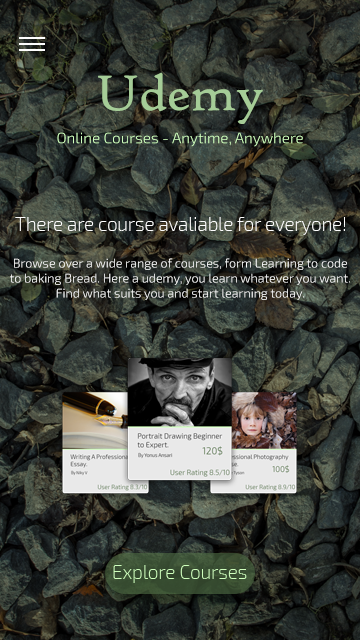
<style>
.page{position:relative;width:360px;height:640px}
.page>*{position:absolute;margin:0}
.t1{font:53.4px "HighTowerText-Reg";color:#a5cc97}
.t2{font:15.1px "Exo2-Light";color:#cfffbd}
.t3{font:18.6px "Exo2-ExtraLight";color:#ffffff}
.t4{font:12.5px "Exo2-Light";color:#ffffff}
.t5{font:18.6px "Exo2-ExtraLight";color:#cfffbd}
</style>
<div class="page">
<p class="t1" style="left:98px;top:72px;width:165px;height:52px">Udemy</p>
<p class="t2" style="left:57px;top:132px;width:246px;height:15px">Online Courses - Anytime, Anywhere</p>
<p class="t3" style="left:15px;top:217px;width:330px;height:18px">There are course avaliable for everyone!</p>
<p class="t4" style="left:10px;top:258px;width:340px;height:42px;text-align:center">Browse over a wide range of courses, form Learning to code<br>to baking Bread. Here a udemy, you learn whatever you want.<br>Find what suits you and start learning today.</p>
<p class="t5" style="left:113px;top:565px;width:134px;height:18px">Explore Courses</p>
</div>
